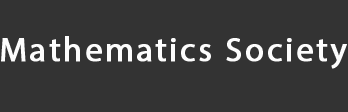
<style>
.page{position:relative;width:348px;height:112px;background:#333333}
.page>*{position:absolute;margin:0}
.t1{font:34px "MyriadPro-Regular";letter-spacing:0.06em;color:#fdfdfd;font-weight:bold}
</style>
<div class="page">
<p class="t1" style="left:1px;top:36px;width:346px;height:33px">Mathematics Society</p>
</div>
